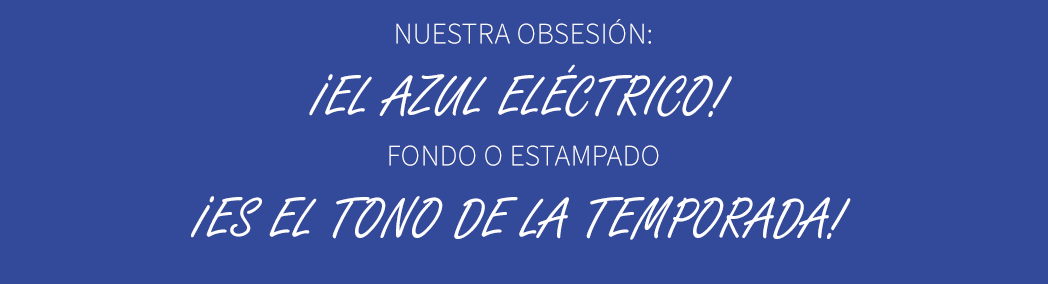
<style>
.page{position:relative;width:1048px;height:284px;background:#334a9a}
.page>*{position:absolute;margin:0}
.t1{font:60px "FreestyleScript-Regular";color:#fefefe}
.t2{font:30px "SourceSansPro-Light";color:#fefefe}
.t3{font:60px "FreestyleScript-Regular";letter-spacing:-0.18em;color:#fefefe}
.t4{font:30px/50px "SourceSansPro-Light";color:#fefefe}
</style>
<div class="page">
<p class="t1" style="left:191px;top:19px;width:660px;height:221px;text-align:center"><span class="t2">NUESTRA OBSESIÓN:<br></span><span class="t3">¡</span>EL AZUL ELÉCTRICO!<br><span class="t4">FONDO O ESTAMPADO<br></span><span class="t3">¡</span>ES EL TONO DE LA TEMPORADA!</p>
</div>
